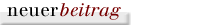
<style>
.page{position:relative;width:200px;height:25px;background:#ffffff}
.page>*{position:absolute;margin:0}
.t1{font:18px "WalbaumBook-Italic";letter-spacing:0.025em;color:#760000}
.t2{font:18px "WalbaumBook-Regular";letter-spacing:0.025em;color:#000000}
</style>
<div class="page">
<p class="t1" style="left:7px;top:3px;width:114px;height:17px"><span class="t2">neuer</span>beitrag</p>
</div>
